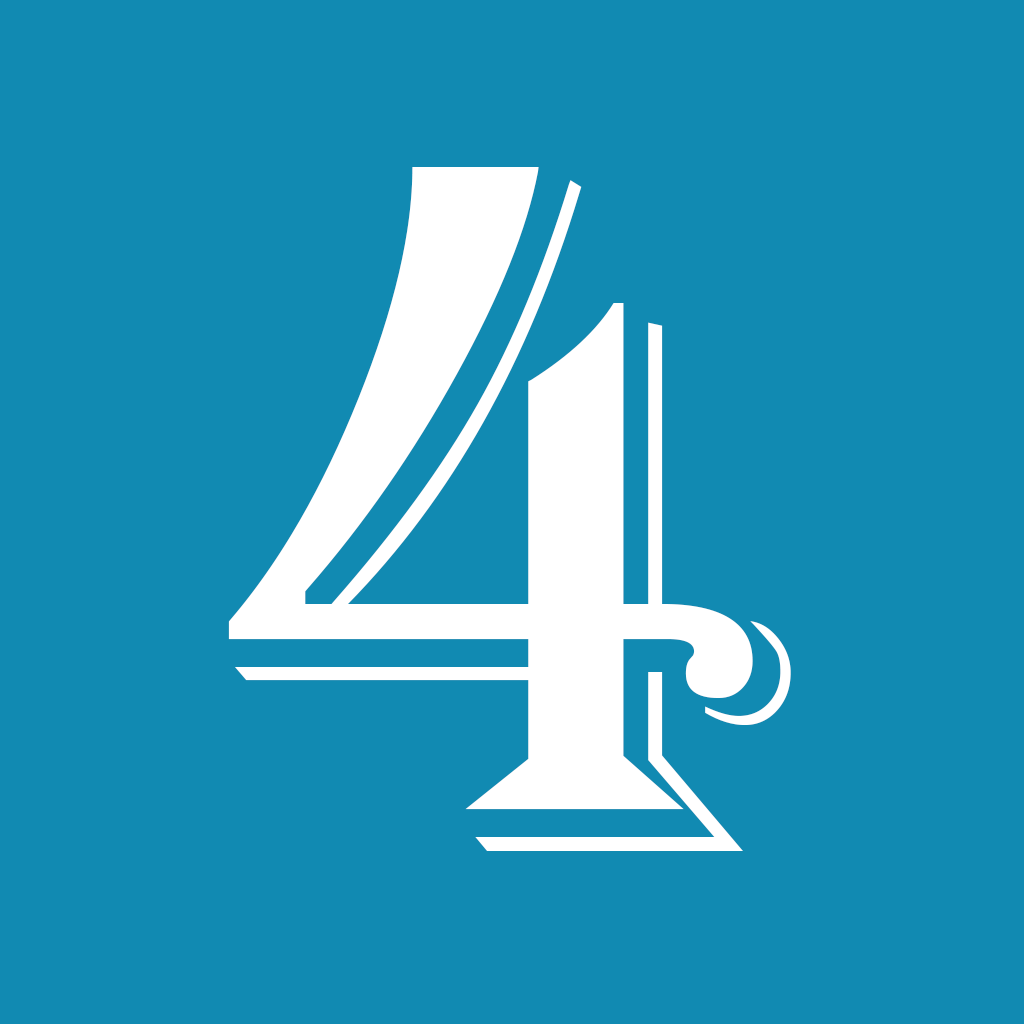
<style>
.page{position:relative;width:1024px;height:1024px;background:#118ab2}
.page>*{position:absolute;margin:0}
.t1{font:1041px "Algerian";color:#ffffff}
</style>
<div class="page">
<p class="t1" style="left:228px;top:167px;width:563px;height:684px">4</p>
</div>
